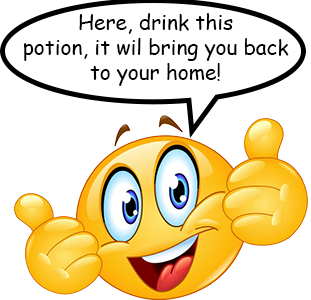
<style>
.page{position:relative;width:311px;height:300px;background:#ffffff}
.page>*{position:absolute;margin:0}
.t1{font:20.8px "ComicSansMS";color:#000000}
</style>
<div class="page">
<p class="t1" style="left:23px;top:13px;width:266px;height:73px;text-align:center">Here, drink this<br>potion, it wil bring you back to your home!</p>
</div>
